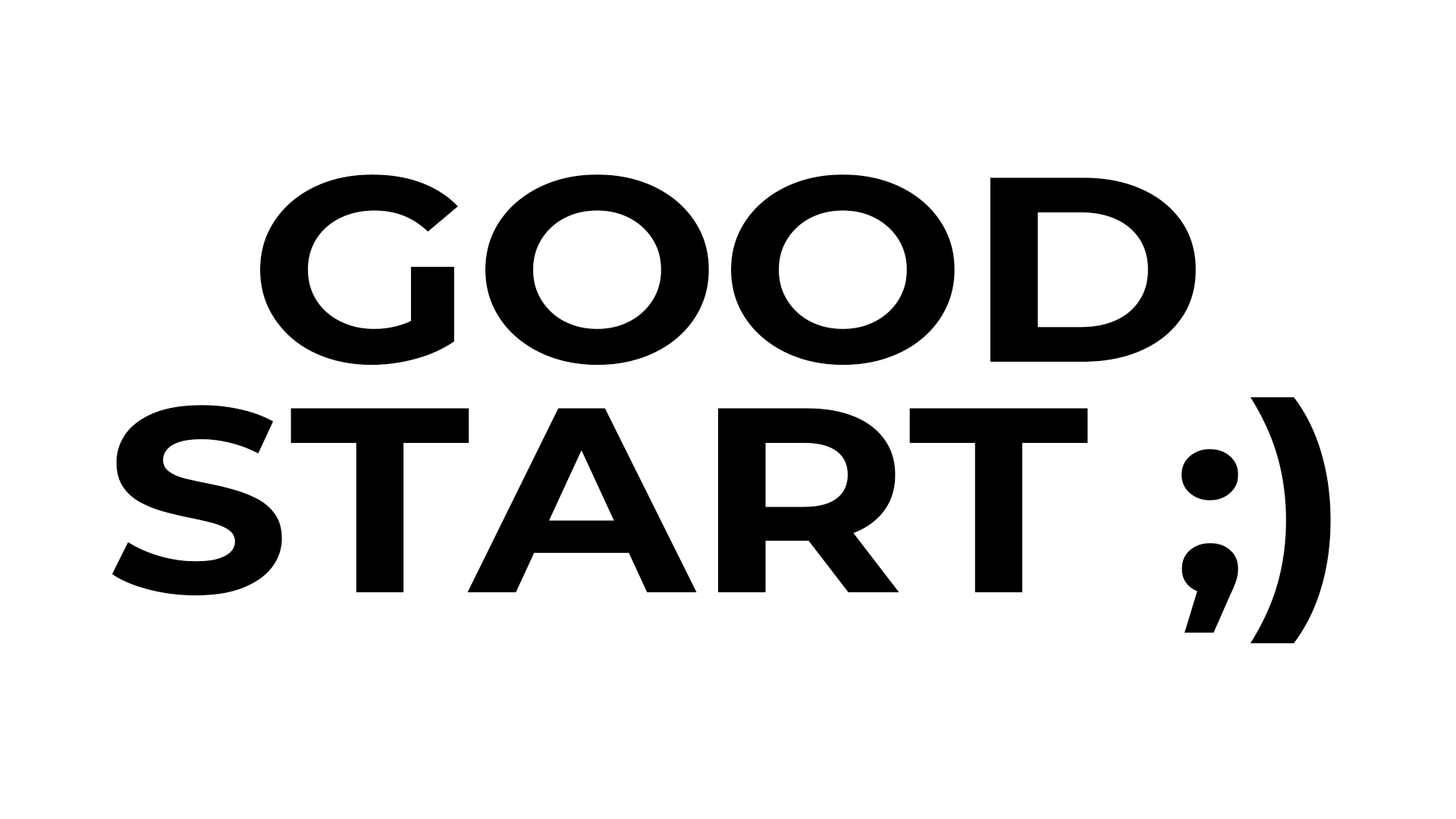
<style>
.page{position:relative;width:1456px;height:819px;background:#ffffff}
.page>*{position:absolute;margin:0}
.t1{font:262.9px "MontserratRoman-Bold";color:#000000;scale:1.11 1}
</style>
<div class="page">
<p class="t1" style="left:111px;top:174px;width:1220px;height:470px;text-align:center">GOOD<br>START ;)</p>
</div>
